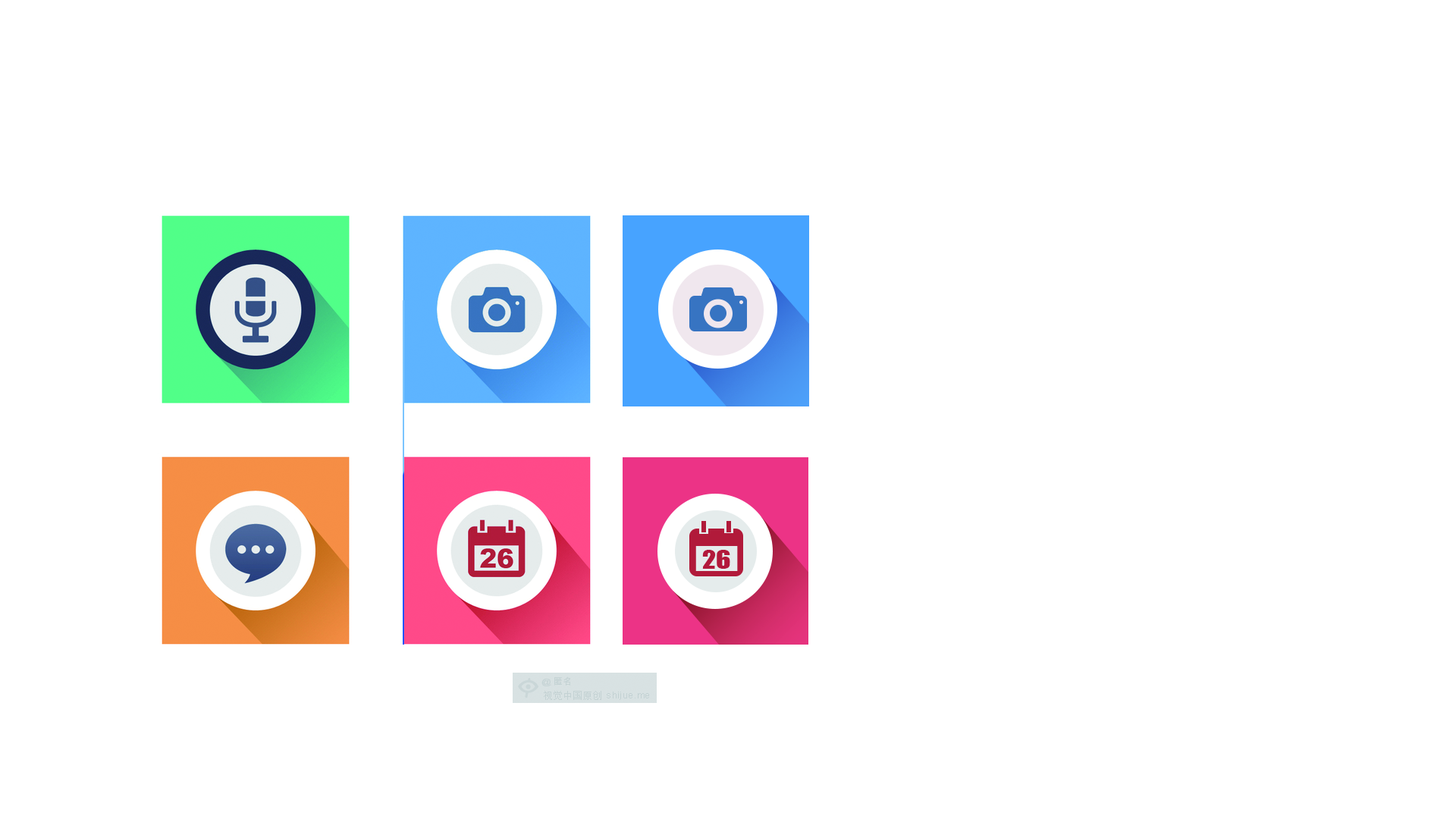
<style>
.page{position:relative;width:1456px;height:819px;background:#ffffff}
.page>*{position:absolute;margin:0}
.t1{font:23.9px "Impact";color:#b2193b;scale:1.14 1}
</style>
<div class="page">
<p class="t1" style="left:702px;top:550px;width:28px;height:19px">26</p>
</div>
